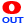
<style>
.page{position:relative;width:24px;height:24px;background:#ffffff}
.page>*{position:absolute;margin:0}
.t1{font:16.4px "BlackoakStd";color:#fc0000;scale:0.67 1}
.t2{font:11px "CopperplateGothic-Bold";color:#0035fc}
</style>
<div class="page">
<p class="t1" style="left:2px;top:1px;width:19px;height:13px">O</p>
<p class="t2" style="left:2px;top:17px;width:22px;height:6px">out</p>
</div>
